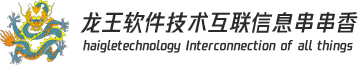
<style>
.page{position:relative;width:361px;height:65px;background:#ffffff}
.page>*{position:absolute;margin:0}
.t1{font:22.8px "FontName";color:#2c2b2b;scale:0.94 1}
.t2{font:12.8px "FontName";color:#2f2f2f;scale:0.94 1}
</style>
<div class="page">
<p class="t1" style="left:80px;top:12px;width:278px;height:21px">龙王软件技术互联信息串串香</p>
<p class="t2" style="left:83px;top:39px;width:270px;height:14px">haigletechnology Interconnection of all things</p>
</div>
